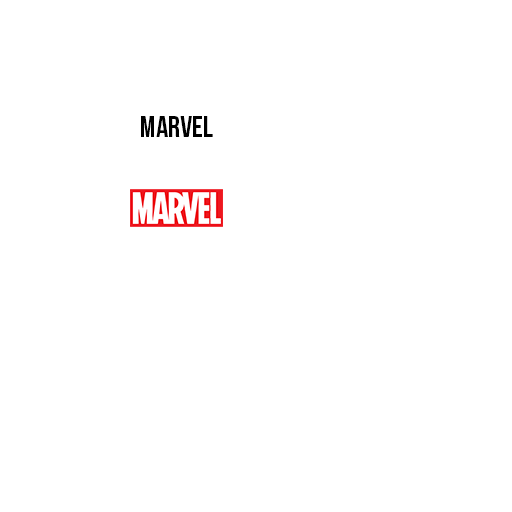
<style>
.page{position:relative;width:512px;height:512px;background:#ffffff}
.page>*{position:absolute;margin:0}
.t1{font:30px "BebasNeue";color:#000000}
</style>
<div class="page">
<p class="t1" style="left:141px;top:116px;width:72px;height:21px">marvel</p>
</div>
